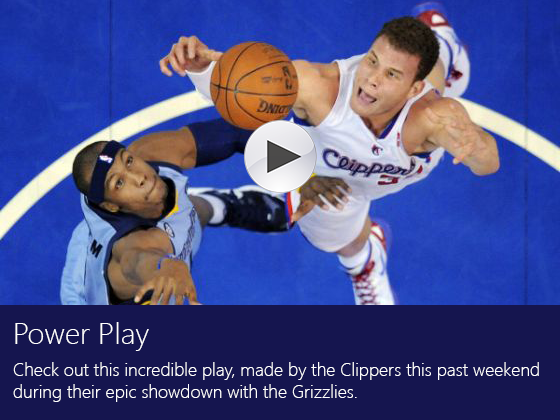
<style>
.page{position:relative;width:560px;height:420px;background:#15154f}
.page>*{position:absolute;margin:0}
.t1{font:30px "SegoeUI-Light";color:#ffffff}
.t2{font:18px "SegoeUI-Light";color:#ffffff}
</style>
<div class="page">
<p class="t1" style="left:15px;top:322px;width:134px;height:29px">Power Play</p>
<p class="t2" style="left:13px;top:362px;width:526px;height:40px">Check out this incredible play, made by the Clippers this past weekend<br>during their epic showdown with the Grizzlies.</p>
</div>
